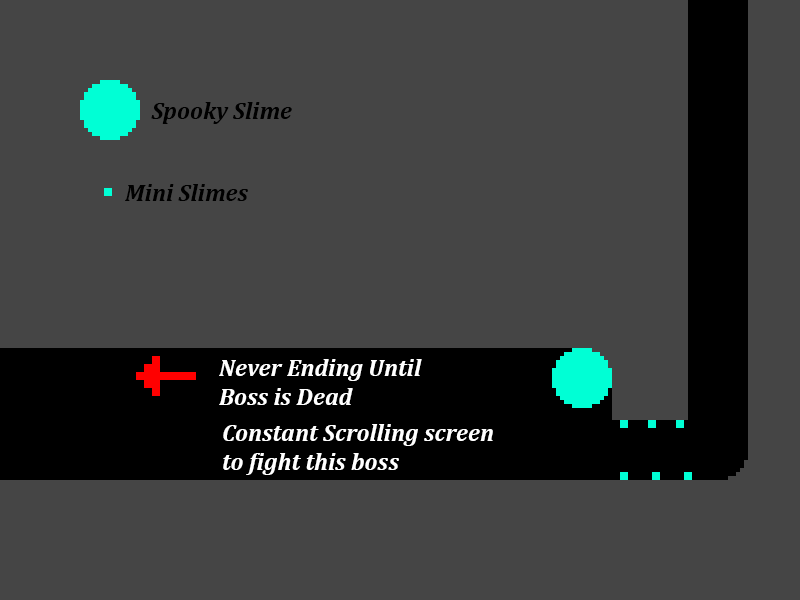
<style>
.page{position:relative;width:800px;height:600px;background:#454545}
.page>*{position:absolute;margin:0}
.t1{font:24px "Cambria-BoldItalic";color:#000000}
.t2{font:24px "Cambria-BoldItalic";color:#ffffff}
</style>
<div class="page">
<p class="t1" style="left:151px;top:102px;width:141px;height:22px">Spooky Slime</p>
<p class="t1" style="left:125px;top:184px;width:123px;height:17px">Mini Slimes</p>
<p class="t2" style="left:219px;top:359px;width:203px;height:46px">Never Ending Until <br>Boss is Dead</p>
<p class="t2" style="left:223px;top:424px;width:270px;height:51px">Constant Scrolling screen<br>to fight this boss</p>
</div>
